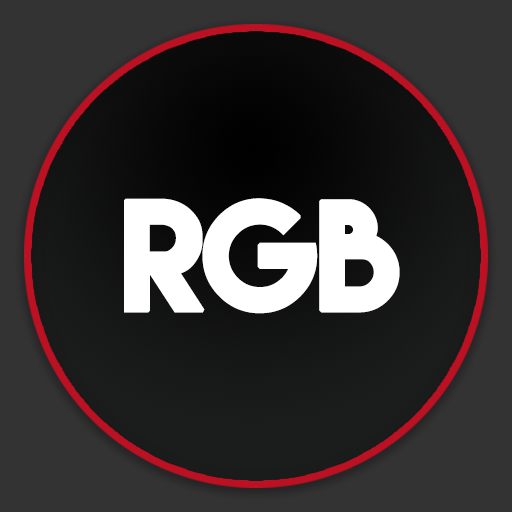
<style>
.page{position:relative;width:512px;height:512px;background:#333333}
.page>*{position:absolute;margin:0}
.t1{font:139.4px "LemonMilk";letter-spacing:-0.02em;color:#ffffff;font-weight:bold}
</style>
<div class="page">
<p class="t1" style="left:124px;top:198px;width:276px;height:116px">RGB</p>
</div>
